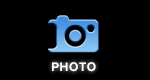
<style>
.page{position:relative;width:150px;height:80px;background:#000000}
.page>*{position:absolute;margin:0}
.t1{font:12px "AlteHaasGrotesk_Bold";letter-spacing:0.05em;color:#ffffff}
</style>
<div class="page">
<p class="t1" style="left:52px;top:62px;width:44px;height:10px">PHOTO</p>
</div>
